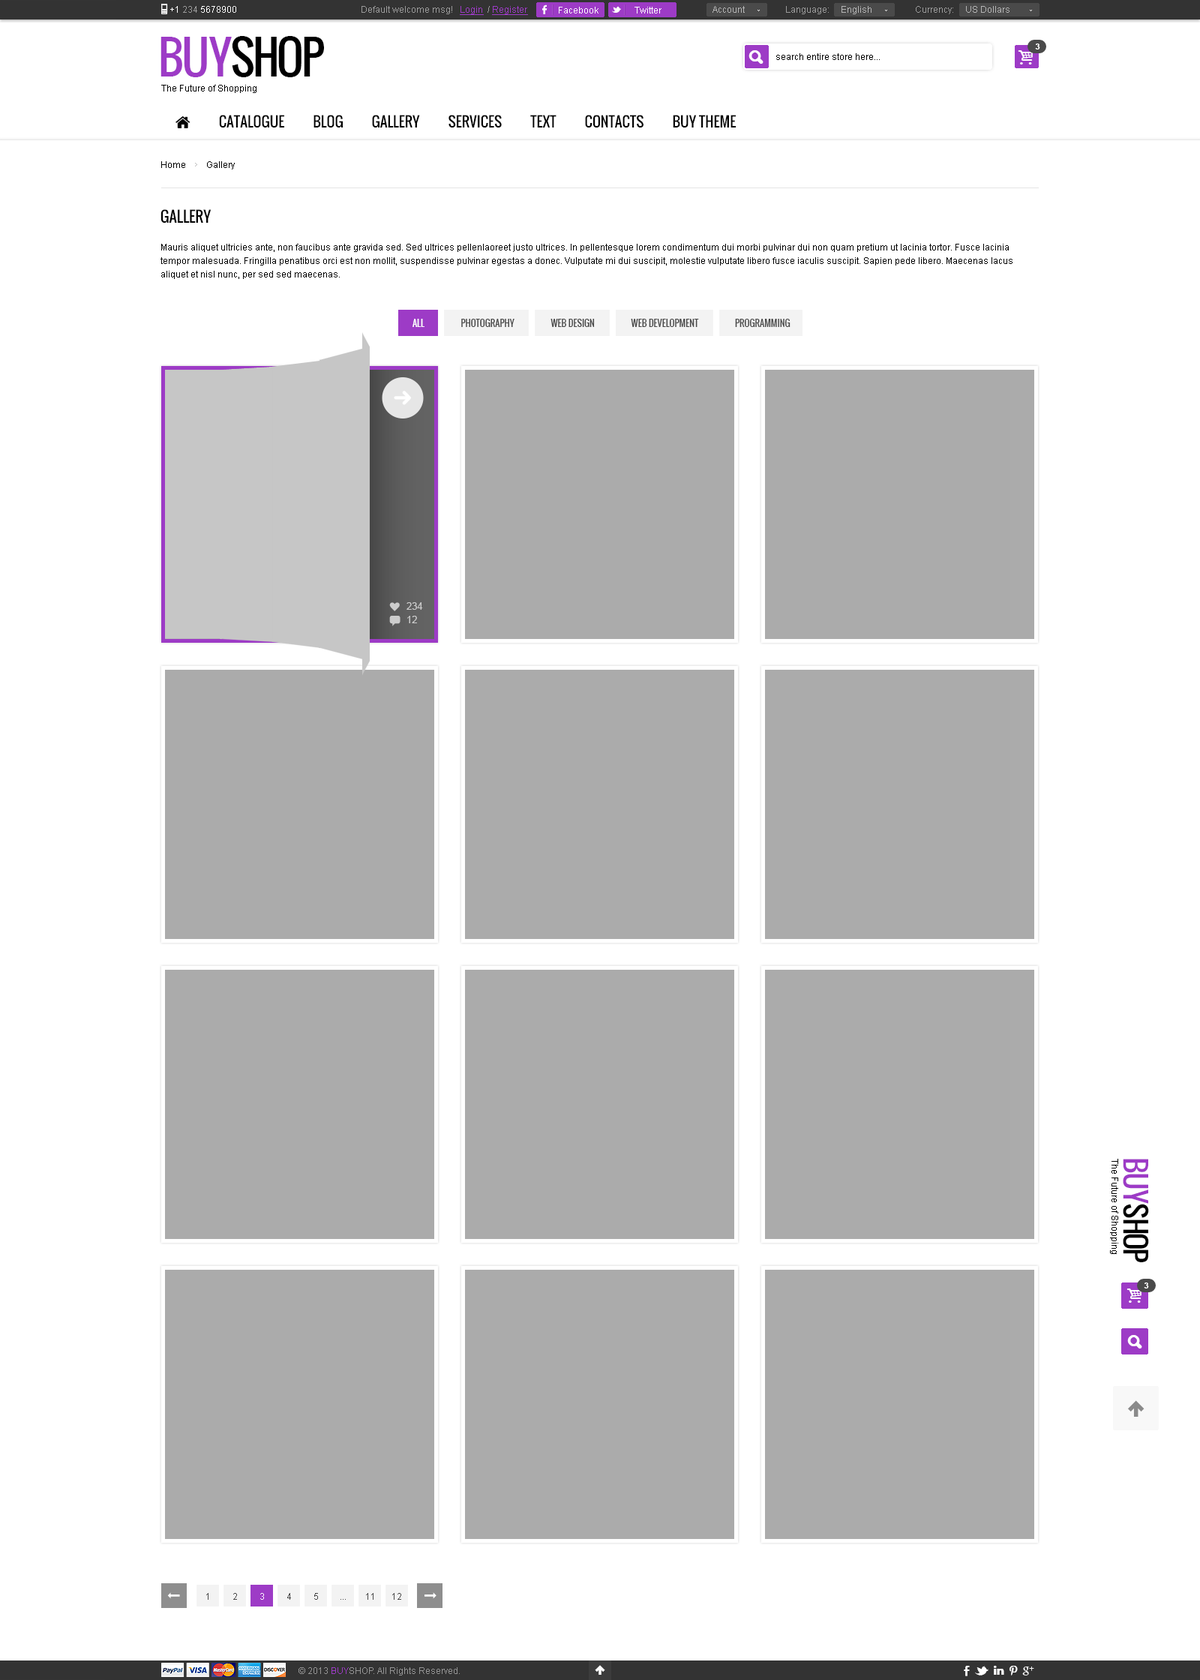
<style>
.page{position:relative;width:1200px;height:1680px;background:#ffffff}
.page>*{position:absolute;margin:0}
.t1{font:9px "ArialMT";color:#ffffff}
.t2{font:9px "ArialMT";color:#9b9b9b}
.t3{font:9px "ArialMT";color:#9d3bc6;text-decoration:underline}
.t4{font:9px "ArialMT";color:#b6b6b6}
.t5{font:45px "Oswald";letter-spacing:-0.06em;color:#000000;text-transform:uppercase}
.t6{font:45px "Oswald";letter-spacing:-0.06em;color:#9d3bc6;text-transform:uppercase}
.t7{font:9px "ArialMT";color:#000000}
.t8{font:8.2px "Arial-BoldMT";color:#ffffff;text-transform:uppercase}
.t9{font:15px "Oswald";color:#000000;text-transform:uppercase}
.t10{font:9px/13.5px "ArialMT";color:#000000}
.t11{font:9px "Oswald";color:#484848;text-transform:uppercase}
.t12{font:9px "Oswald";color:#ffffff;text-transform:uppercase}
.t13{font:21px "andepict";color:#ffffff;text-transform:uppercase}
.t14{font:9.8px/13.5px "ArialMT";color:#cccccc;text-transform:uppercase}
.t15{font:28.5px "Oswald";letter-spacing:-0.06em;color:#000000;text-transform:uppercase}
.t16{font:28.5px "Oswald";letter-spacing:-0.06em;color:#9d3bc6;text-transform:uppercase}
.t17{font:9px "ArialMT";color:#484848;text-transform:uppercase}
.t18{font:9px "ArialMT";color:#ffffff;text-transform:uppercase}
.t19{font:9px "ArialMT";color:#959595}
.t20{font:9px "ArialMT";color:#9d3bc6}
</style>
<div class="page">
<p class="t1" style="left:170px;top:6px;width:66px;height:7px">+1 <span class="t2">234 </span>5678900</p>
<p class="t2" style="left:362px;top:6px;width:166px;height:9px">Default welcome msg!   <span class="t3">Login </span> / <span class="t3">Register</span></p>
<p class="t2" style="left:362px;top:6px;width:166px;height:9px">Default welcome msg!   <span class="t3">Login </span> / <span class="t3">Register</span></p>
<p class="t4" style="left:712px;top:6px;width:33px;height:7px">Account</p>
<p class="t2" style="left:786px;top:6px;width:86px;height:8px">Language:     <span class="t4">English</span></p>
<p class="t4" style="left:916px;top:6px;width:94px;height:8px"><span class="t2">Currency:     </span>US Dollars</p>
<p class="t1" style="left:559px;top:7px;width:39px;height:7px">Facebook</p>
<p class="t1" style="left:634px;top:7px;width:28px;height:7px">Twitter</p>
<p class="t5" style="left:160px;top:36px;width:164px;height:41px"><span class="t6">buy</span>shop</p>
<p class="t7" style="left:776px;top:53px;width:104px;height:7px">search entire store here...</p>
<p class="t8" style="left:1035px;top:44px;width:5px;height:6px">3</p>
<p class="t7" style="left:161px;top:85px;width:95px;height:8px">The Future of Shopping</p>
<p class="t7" style="left:161px;top:161px;width:74px;height:9px">Home         Gallery</p>
<p class="t9" style="left:160px;top:209px;width:52px;height:15px">GALLERY</p>
<p class="t10" style="left:160px;top:244px;width:852px;height:35px">Mauris aliquet ultricies ante, non faucibus ante gravida sed. Sed ultrices pellenlaoreet justo ultrices. In pellentesque lorem condimentum dui morbi pulvinar dui non quam pretium ut lacinia tortor. Fusce lacinia tempor malesuada. Fringilla penatibus orci est non mollit, suspendisse pulvinar egestas a donec. Vulputate mi dui suscipit, molestie vulputate libero fusce iaculis suscipit. Sapien pede libero. Maecenas lacus aliquet et nisl nunc, per sed sed maecenas.</p>
<p class="t11" style="left:412px;top:319px;width:378px;height:8px"><span class="t12">All                    </span>PHOTOGRAPHY                    WEB DESIGN                    WEB DEVELOPMENT                    PROGRAMMING</p>
<p class="t13" style="left:394px;top:391px;width:17px;height:14px">→</p>
<p class="t14" style="left:406px;top:602px;width:17px;height:21px">234<br>12</p>
<p class="t7" style="left:1110px;top:1159px;width:8px;height:95px;rotate:90deg">The Future of Shopping</p>
<p class="t15" style="left:1123px;top:1159px;width:26px;height:103px;rotate:90deg"><span class="t16">buy</span>shop</p>
<p class="t8" style="left:1144px;top:1282px;width:5px;height:6px">3</p>
<p class="t17" style="left:206px;top:1593px;width:2px;height:7px">1</p>
<p class="t17" style="left:233px;top:1593px;width:4px;height:7px">2</p>
<p class="t18" style="left:260px;top:1593px;width:4px;height:7px">3</p>
<p class="t17" style="left:287px;top:1593px;width:4px;height:7px">4</p>
<p class="t17" style="left:314px;top:1593px;width:4px;height:7px">5</p>
<p class="t17" style="left:340px;top:1599px;width:6px;height:1px">...</p>
<p class="t17" style="left:366px;top:1593px;width:8px;height:7px">11</p>
<p class="t17" style="left:392px;top:1593px;width:9px;height:7px">12</p>
<p class="t19" style="left:298px;top:1667px;width:162px;height:9px">© 2013 <span class="t20">BUY</span>SHOP. All Rights Reserved.</p>
</div>
